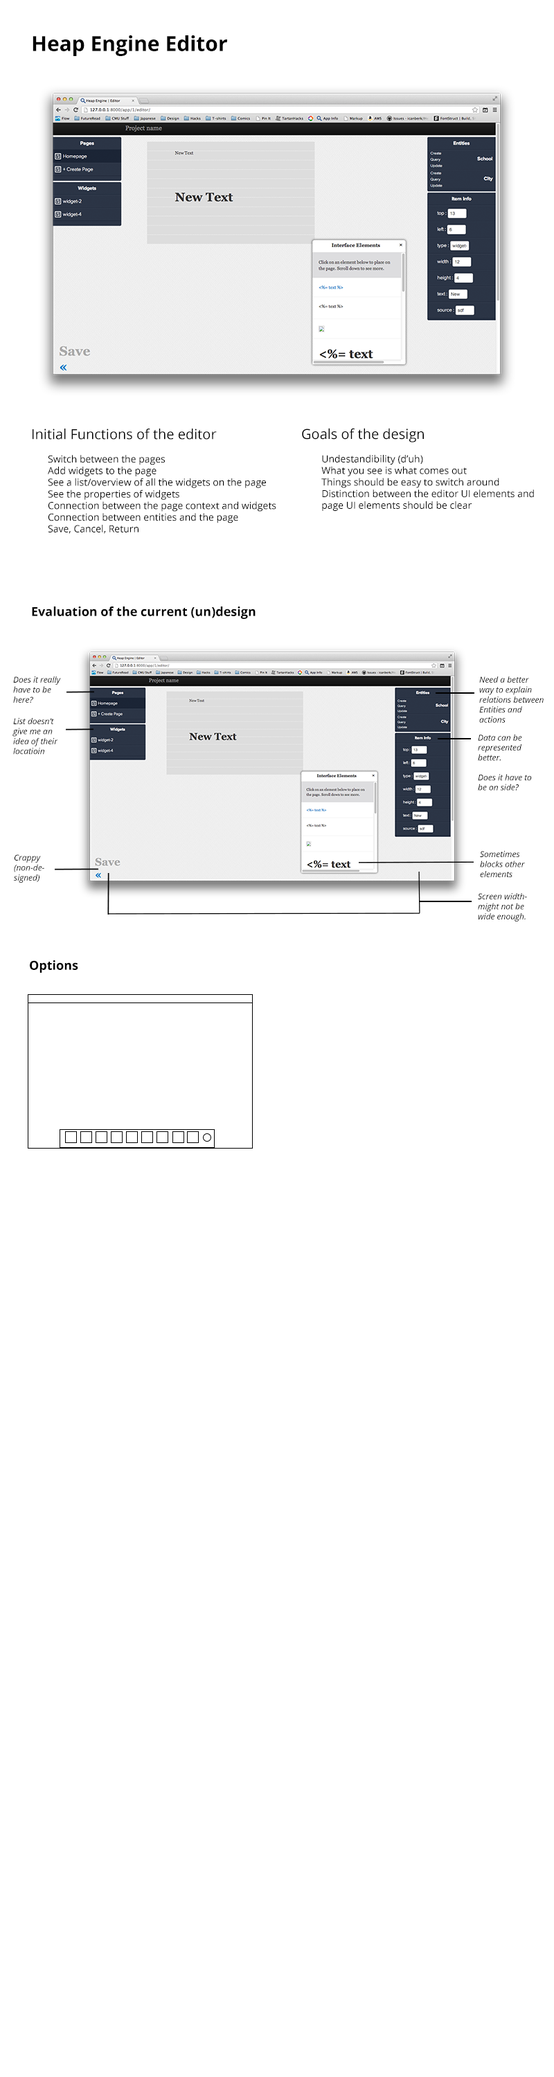
<style>
.page{position:relative;width:554px;height:2077px;background:#ffffff}
.page>*{position:absolute;margin:0}
.t1{font:20.8px "OpenSans-Bold";color:#000000}
.t2{font:13.8px "OpenSans";color:#000000}
.t3{font:9.7px "OpenSans";color:#000000}
.t4{font:12.5px "OpenSans-Bold";color:#000000}
.t5{font:8.3px "OpenSans-Italic";color:#000000}
</style>
<div class="page">
<p class="t1" style="left:33px;top:35px;width:194px;height:21px">Heap Engine Editor</p>
<p class="t2" style="left:33px;top:429px;width:184px;height:11px">Initial Functions of the editor</p>
<p class="t2" style="left:302px;top:428px;width:122px;height:14px">Goals of the design</p>
<p class="t3" style="left:48px;top:455px;width:228px;height:79px">Switch between the pages<br>Add widgets to the page<br>See a list/overview of all the widgets on the page<br>See the properties of widgets<br>Connection between the page context and widgets<br>Connection between entities and the page<br>Save, Cancel, Return</p>
<p class="t3" style="left:321px;top:455px;width:213px;height:56px">Undestandibility (d’uh)<br>What you see is what comes out<br>Things should be easy to switch around<br>Distinction between the editor UI elements and page UI elements should be clear</p>
<p class="t4" style="left:32px;top:607px;width:223px;height:12px">Evaluation of the current (un)design</p>
<p class="t5" style="left:13px;top:676px;width:48px;height:27px">Does it really have to be here?</p>
<p class="t5" style="left:479px;top:676px;width:65px;height:47px">Need a better way to explain relations between Entities and actions</p>
<p class="t5" style="left:12px;top:718px;width:46px;height:37px">List doesn’t give me an idea of their locatioin</p>
<p class="t5" style="left:478px;top:734px;width:54px;height:57px">Data can be represented better.<br><br>Does it have to be on side?</p>
<p class="t5" style="left:14px;top:854px;width:30px;height:29px">Crappy (non-designed)</p>
<p class="t5" style="left:480px;top:851px;width:45px;height:26px">Sometimes blocks other elements</p>
<p class="t5" style="left:478px;top:893px;width:49px;height:29px">Screen widthmight not be wide enough.</p>
<p class="t4" style="left:30px;top:960px;width:48px;height:13px">Options</p>
</div>
